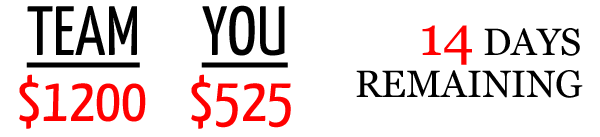
<style>
.page{position:relative;width:600px;height:137px;background:#ffffff}
.page>*{position:absolute;margin:0}
.t1{font:69.6px "YanoneKaffeesatz-Regular";color:#000000;text-transform:uppercase;text-decoration:underline}
.t2{font:38px "Georgia";color:#000000;text-transform:uppercase}
.t3{font:55px "Georgia";color:#ff0000;text-transform:uppercase}
.t4{font:62.7px "YanoneKaffeesatz-Regular";color:#ff0000;text-transform:uppercase}
</style>
<div class="page">
<p class="t1" style="left:26px;top:6px;width:114px;height:62px">Team</p>
<p class="t1" style="left:201px;top:5px;width:87px;height:63px">You</p>
<p class="t2" style="left:422px;top:25px;width:158px;height:40px"><span class="t3">14</span> Days</p>
<p class="t4" style="left:19px;top:74px;width:127px;height:55px">$1200</p>
<p class="t4" style="left:191px;top:74px;width:100px;height:55px">$525</p>
<p class="t2" style="left:356px;top:70px;width:227px;height:28px">remaining</p>
</div>
